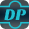
<style>
.page{position:relative;width:29px;height:29px}
.page>*{position:absolute;margin:0}
.t1{font:16px "SansitaOne";color:#21bfd0}
</style>
<div class="page">
<p class="t1" style="left:4px;top:9px;width:22px;height:12px">DP</p>
</div>
